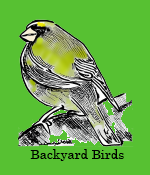
<style>
.page{position:relative;width:150px;height:175px;background:#57c132}
.page>*{position:absolute;margin:0}
.t1{font:13px "Century";color:#000000}
</style>
<div class="page">
<p class="t1" style="left:30px;top:149px;width:94px;height:12px">Backyard Birds</p>
</div>
